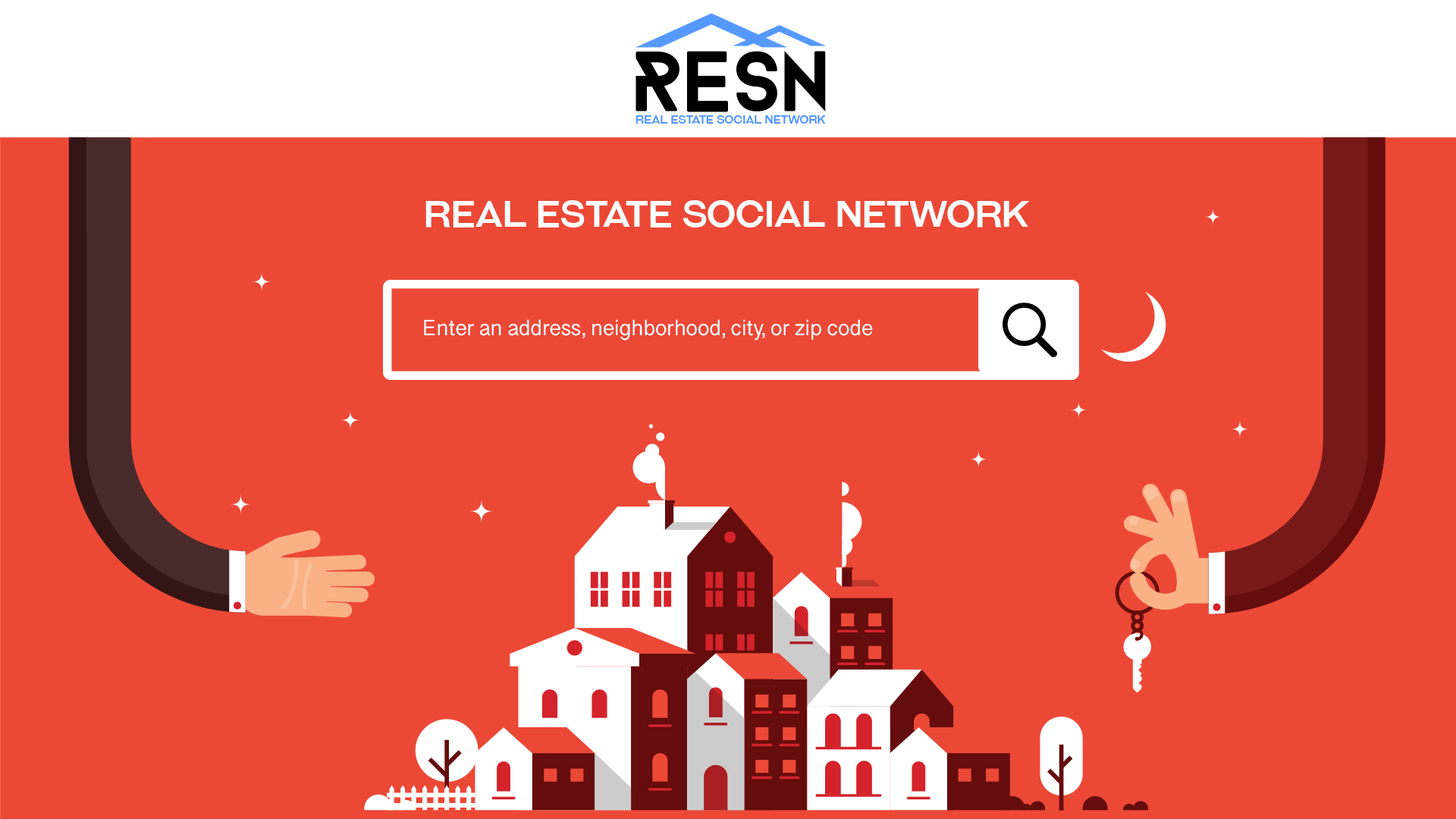
<style>
.page{position:relative;width:1456px;height:819px;background:#ec4836}
.page>*{position:absolute;margin:0}
.t1{font:36.4px "GalderglynnTitlingRg-Regular";color:#ffffff}
.t2{font:18.2px "GujaratiSangamMN";color:#ffffff}
</style>
<div class="page">
<p class="t1" style="left:425px;top:200px;width:605px;height:27px">Real Estate Social Network</p>
<p class="t2" style="left:424px;top:319px;width:449px;height:21px">Enter an address, neighborhood, city, or zip code</p>
</div>
